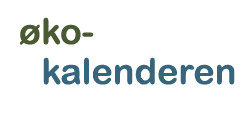
<style>
.page{position:relative;width:250px;height:113px;background:#ffffff}
.page>*{position:absolute;margin:0}
.t1{font:36px "ArialRoundedMTBold";color:#495932}
.t2{font:36px "ArialRoundedMTBold";color:#37657c}
</style>
<div class="page">
<p class="t1" style="left:20px;top:17px;width:74px;height:28px">øko-</p>
<p class="t2" style="left:43px;top:57px;width:192px;height:28px">kalenderen</p>
</div>
